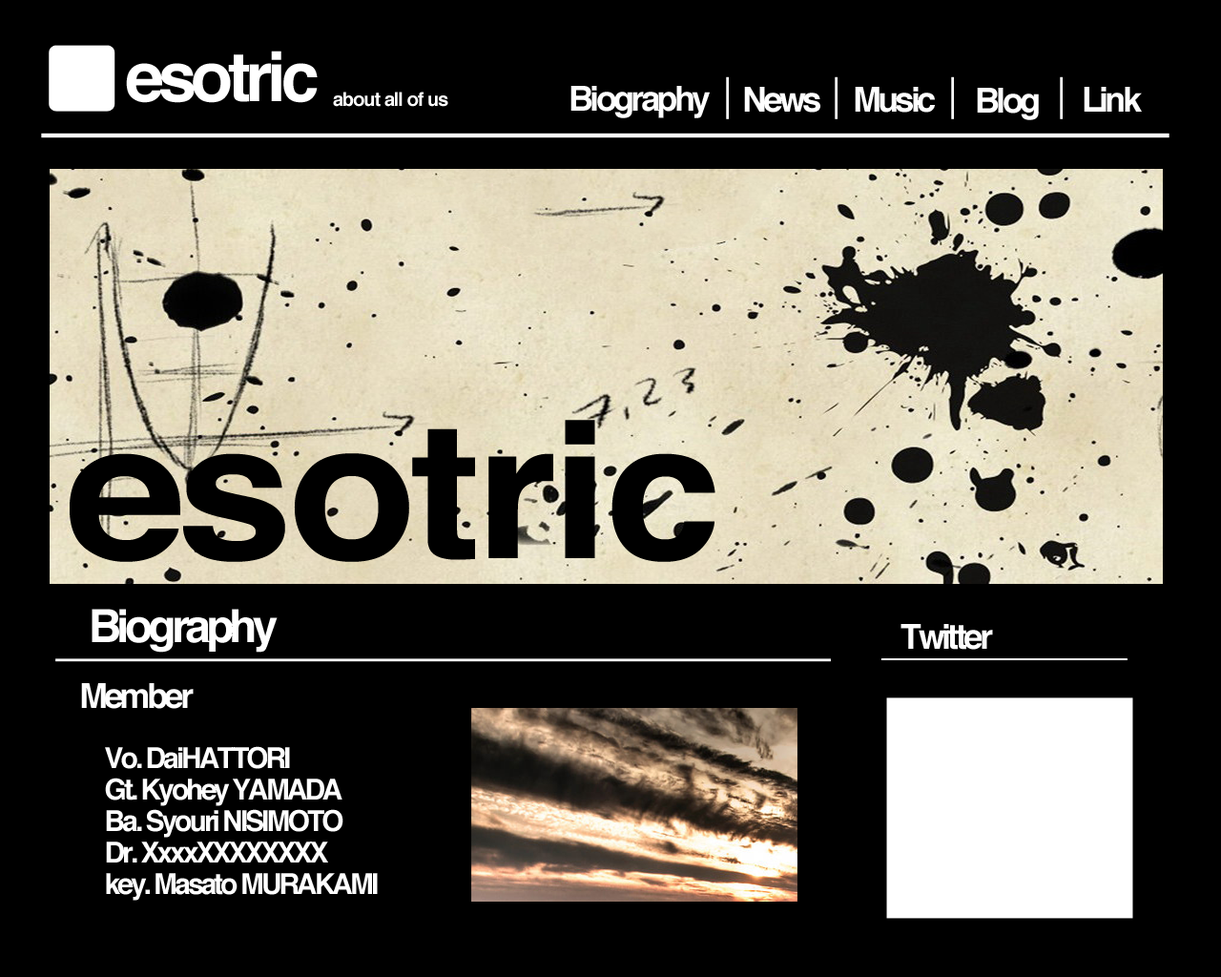
<style>
.page{position:relative;width:1221px;height:977px;background:#000000}
.page>*{position:absolute;margin:0}
.t1{font:68.7px "Helvetica-Bold";letter-spacing:-0.075em;color:#ffffff}
.t2{font:34.3px "Helvetica-Bold";letter-spacing:-0.1em;color:#ffffff}
.t3{font:19.1px "Helvetica-Bold";letter-spacing:-0.05em;color:#ffffff}
.t4{font:190.8px "Helvetica-Bold";letter-spacing:-0.025em;color:#000000;scale:1.1 1}
.t5{font:45.8px "Helvetica-Bold";letter-spacing:-0.1em;color:#ffffff}
.t6{font:28.6px/34.3px "Helvetica-Bold";letter-spacing:-0.1em;color:#ffffff}
</style>
<div class="page">
<p class="t1" style="left:126px;top:51px;width:192px;height:52px">esotric</p>
<p class="t2" style="left:570px;top:86px;width:140px;height:32px">Biography</p>
<p class="t2" style="left:744px;top:87px;width:76px;height:26px">News</p>
<p class="t2" style="left:855px;top:87px;width:80px;height:26px">Music</p>
<p class="t2" style="left:977px;top:88px;width:62px;height:32px">Blog</p>
<p class="t2" style="left:1084px;top:87px;width:58px;height:25px">Link</p>
<p class="t3" style="left:333px;top:92px;width:115px;height:15px">about all of us</p>
<p class="t4" style="left:70px;top:420px;width:645px;height:142px">esotric</p>
<p class="t5" style="left:92px;top:609px;width:186px;height:43px">Biography</p>
<p class="t2" style="left:900px;top:624px;width:93px;height:26px">Twitter</p>
<p class="t2" style="left:81px;top:683px;width:113px;height:26px">Member</p>
<p class="t6" style="left:105px;top:746px;width:273px;height:154px">Vo. DaiHATTORI<br>Gt. Kyohey YAMADA<br>Ba. Syouri NISIMOTO<br>Dr. XxxxXXXXXXXX<br>key. Masato MURAKAMI</p>
</div>
